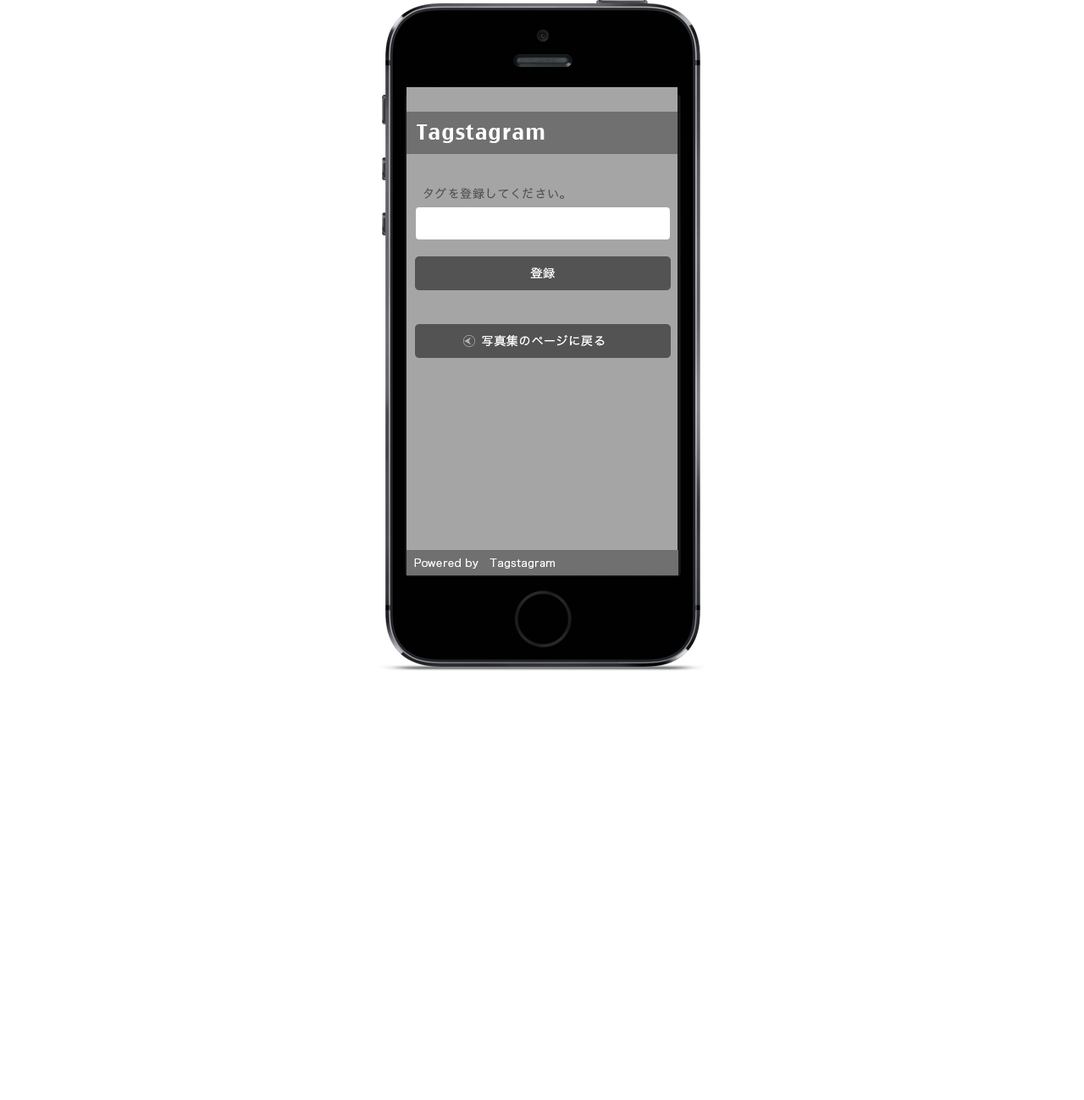
<style>
.page{position:relative;width:1084px;height:1100px;background:#ffffff}
.page>*{position:absolute;margin:0}
.t1{font:20.3px "CharcoalCY";letter-spacing:0.05em;color:#ffffff}
.t2{font:11.9px "HiraKakuPro-W3";letter-spacing:0.05em;color:#535353}
.t3{font:11.9px "HiraKakuPro-W3";letter-spacing:0.05em;color:#ffffff}
.t4{font:10.2px "HiraKakuPro-W3";letter-spacing:0.05em;color:#ffffff}
</style>
<div class="page">
<p class="t1" style="left:416px;top:124px;width:128px;height:19px">Tagstagram</p>
<p class="t2" style="left:423px;top:188px;width:141px;height:11px">タグを登録してください。</p>
<p class="t3" style="left:530px;top:268px;width:24px;height:11px">登録</p>
<p class="t3" style="left:482px;top:335px;width:122px;height:12px">写真集のページに戻る</p>
<p class="t4" style="left:414px;top:559px;width:140px;height:10px">Powered by   Tagstagram</p>
</div>
